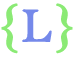
<style>
.page{position:relative;width:74px;height:70px;background:#ffffff}
.page>*{position:absolute;margin:0}
.t1{font:53px "Garamond";color:#8bea75;font-weight:bold}
.t2{font:48px "BellMT";color:#7589ea;font-weight:bold}
</style>
<div class="page">
<p class="t1" style="left:1px;top:3px;width:72px;height:51px">{<span class="t2">L</span>}</p>
</div>
